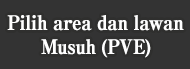
<style>
.page{position:relative;width:190px;height:69px;background:#333333}
.page>*{position:absolute;margin:0}
.t1{font:20px/24px "RyuminPro-ExBold";letter-spacing:-0.04em;color:#ffffff;font-weight:bold;scale:0.9 1}
</style>
<div class="page">
<p class="t1" style="left:7px;top:15px;width:177px;height:43px;text-align:center">Pilih area dan lawan<br>Musuh (PVE)</p>
</div>
